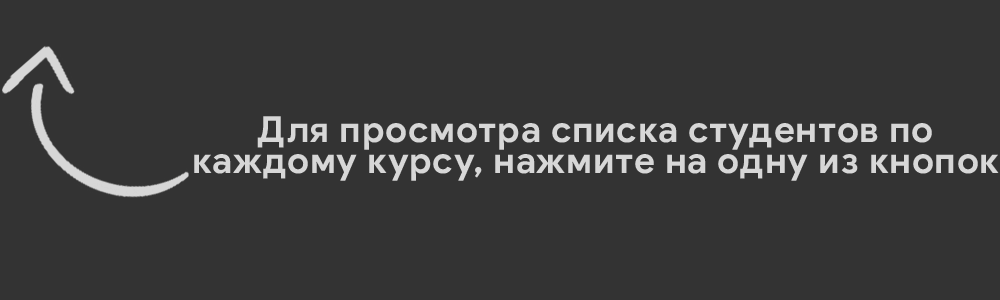
<style>
.page{position:relative;width:1000px;height:300px;background:#333333}
.page>*{position:absolute;margin:0}
.t1{font:36px/31.4px "GoogleSans-Bold";letter-spacing:0.02em;color:#d7d7d7}
</style>
<div class="page">
<p class="t1" style="left:194px;top:116px;width:805px;height:65px;text-align:center">Для просмотра списка студентов по <br>каждому курсу, нажмите на одну из кнопок</p>
</div>
